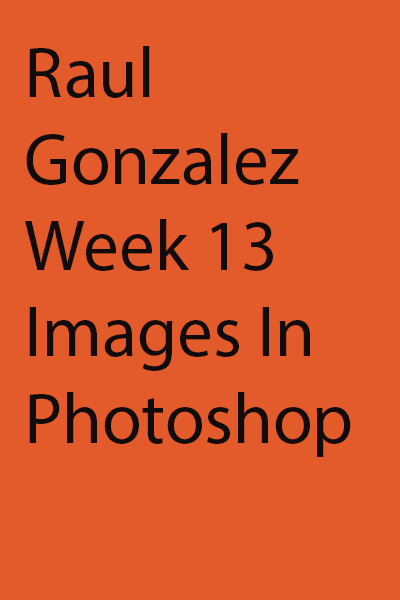
<style>
.page{position:relative;width:400px;height:600px;background:#e35a2b}
.page>*{position:absolute;margin:0}
.t1{font:72px "MyriadPro-Regular";color:#120b0b}
</style>
<div class="page">
<p class="t1" style="left:25px;top:46px;width:326px;height:411px">Raul Gonzalez<br>Week 13<br>Images In<br>Photoshop</p>
</div>
